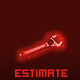
<style>
.page{position:relative;width:80px;height:80px;background:#460a07}
.page>*{position:absolute;margin:0}
.t1{font:12px "hooge05_55Cyr2";color:#ea2317}
</style>
<div class="page">
<p class="t1" style="left:15px;top:69px;width:53px;height:8px">estimate</p>
<p class="t1" style="left:15px;top:69px;width:53px;height:8px">estimate</p>
</div>
